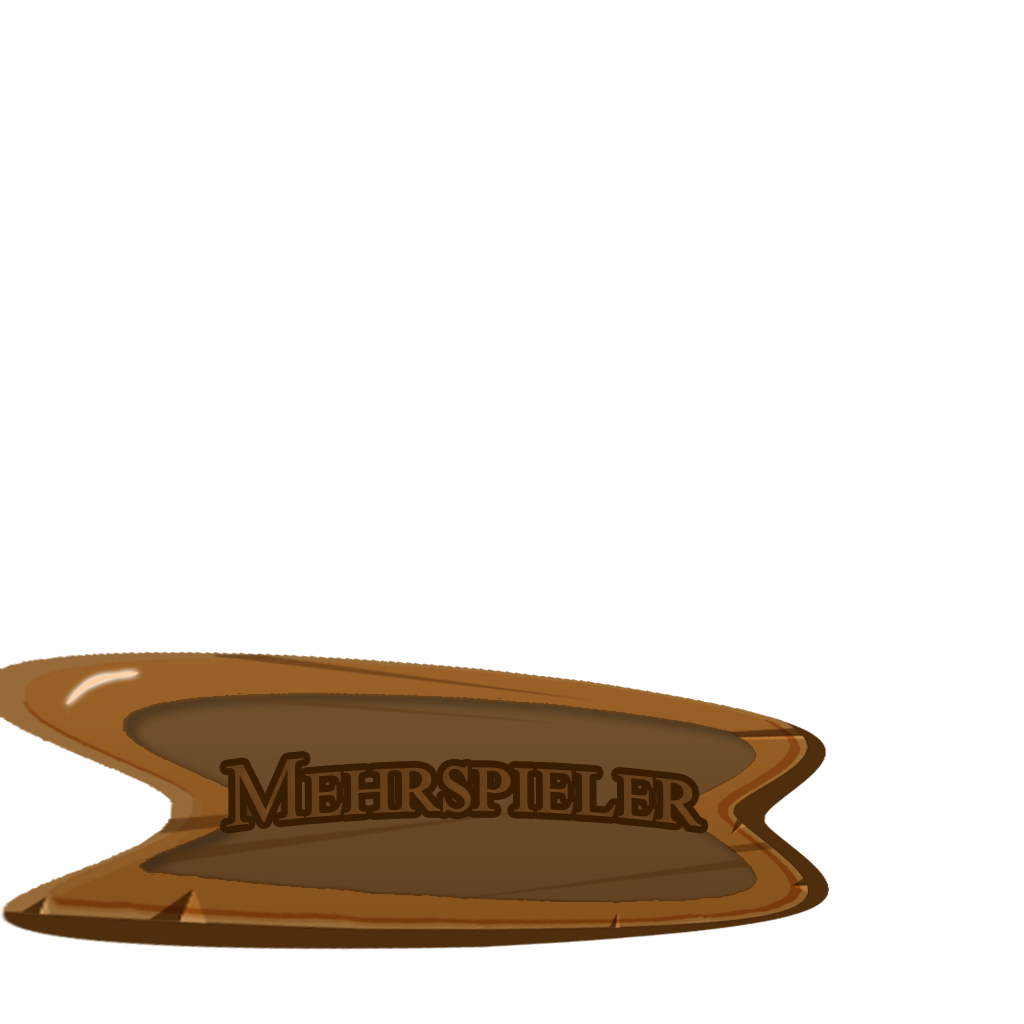
<style>
.page{position:relative;width:1024px;height:1024px;background:#ffffff}
.page>*{position:absolute;margin:0}
.t1{font:90px "TimesNewRomanPSMT";color:#774b20;font-variant:small-caps}
</style>
<div class="page">
<p class="t1" style="left:226px;top:758px;width:476px;height:69px">Mehrspieler</p>
</div>
